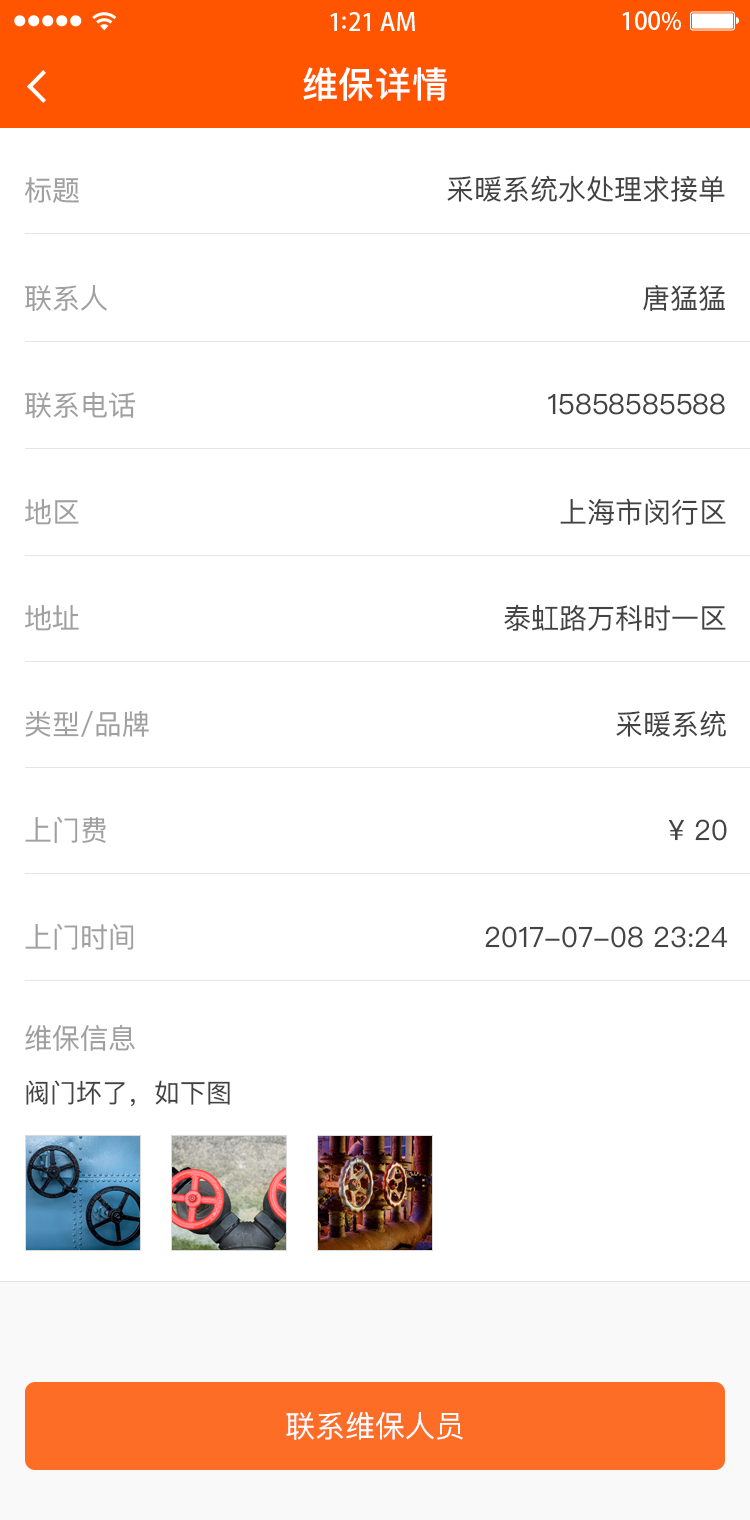
<style>
.page{position:relative;width:750px;height:1520px;background:#ffffff}
.page>*{position:absolute;margin:0}
.t1{font:36px "PingFangSC-Medium";letter-spacing:0.02em;color:#ffffff}
.t2{font:28px "PingFangSC-Regular";color:#a0a0a0}
.t3{font:28px "PingFangSC-Regular";color:#434343}
.t4{font:26px "PingFangSC-Regular";color:#434343}
.t5{font:30px "PingFangSC-Regular";color:#ffffff;text-transform:uppercase}
</style>
<div class="page">
<p class="t1" style="left:303px;top:67px;width:144px;height:34px">维保详情</p>
<p class="t2" style="left:25px;top:177px;width:54px;height:26px">标题</p>
<p class="t3" style="left:447px;top:175px;width:278px;height:27px">采暖系统水处理求接单</p>
<p class="t2" style="left:25px;top:285px;width:82px;height:27px">联系人</p>
<p class="t3" style="left:643px;top:285px;width:82px;height:26px">唐猛猛</p>
<p class="t2" style="left:25px;top:392px;width:111px;height:27px">联系电话</p>
<p class="t3" style="left:548px;top:393px;width:177px;height:22px">15858585588</p>
<p class="t2" style="left:25px;top:499px;width:54px;height:26px">地区</p>
<p class="t3" style="left:560px;top:498px;width:166px;height:27px">上海市闵行区</p>
<p class="t2" style="left:25px;top:605px;width:54px;height:26px">地址</p>
<p class="t3" style="left:504px;top:604px;width:222px;height:27px">泰虹路万科时一区</p>
<p class="t2" style="left:25px;top:710px;width:124px;height:27px">类型/品牌</p>
<p class="t3" style="left:616px;top:710px;width:110px;height:27px">采暖系统</p>
<p class="t2" style="left:25px;top:816px;width:81px;height:27px">上门费</p>
<p class="t3" style="left:668px;top:819px;width:59px;height:22px">¥ 20</p>
<p class="t2" style="left:25px;top:923px;width:109px;height:27px">上门时间</p>
<p class="t3" style="left:485px;top:926px;width:243px;height:22px">2017-07-08 23:24</p>
<p class="t2" style="left:25px;top:1025px;width:110px;height:26px">维保信息</p>
<p class="t4" style="left:26px;top:1080px;width:204px;height:27px">阀门坏了，如下图</p>
<p class="t5" style="left:286px;top:1411px;width:177px;height:29px">联系维保人员</p>
</div>
